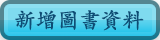
<style>
.page{position:relative;width:160px;height:40px}
.page>*{position:absolute;margin:0}
.t1{font:21.7px "STKaitiSC-Bold";color:#0d4d75}
</style>
<div class="page">
<p class="t1" style="left:15px;top:10px;width:129px;height:21px">新增圖書資料</p>
</div>
